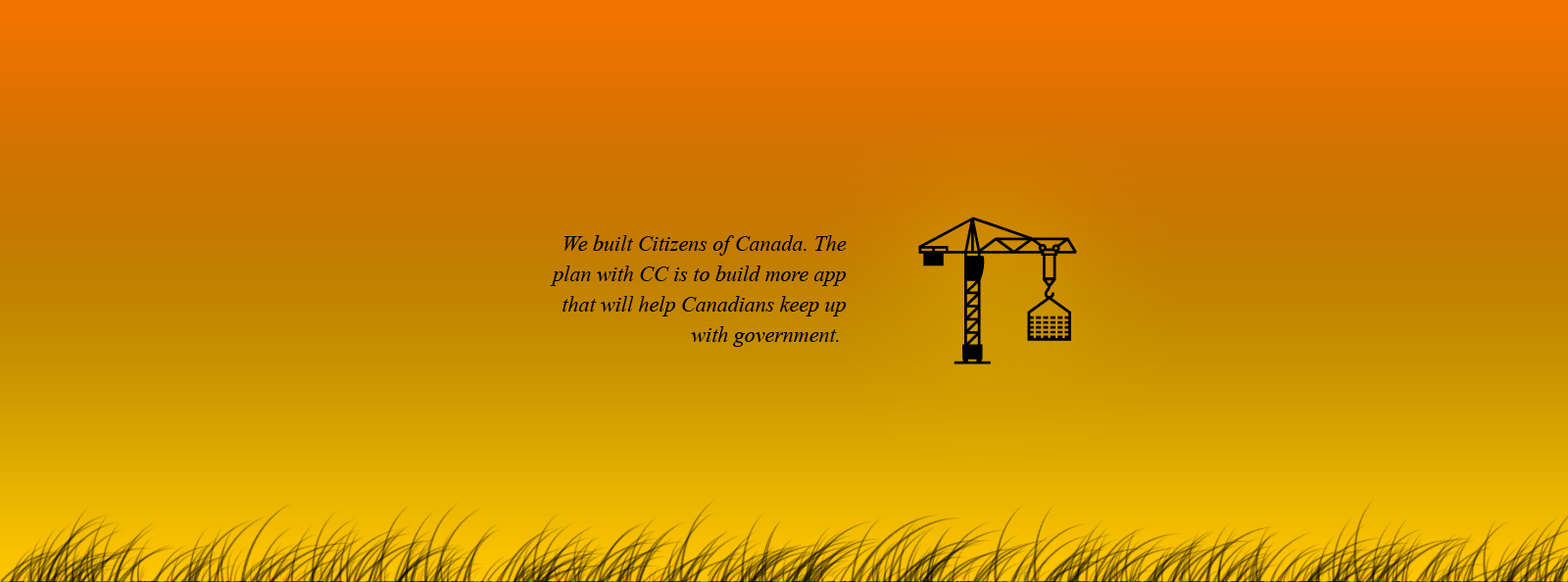
<style>
.page{position:relative;width:1568px;height:582px}
.page>*{position:absolute;margin:0}
.t1{font:21.6px/30.4px "TimesNewRomanPS-ItalicMT";color:#010101}
</style>
<div class="page">
<p class="t1" style="left:550px;top:235px;width:297px;height:112px;text-align:right">We built Citizens of Canada. The plan with CC is to build more app that will help Canadians keep up with government.</p>
</div>
